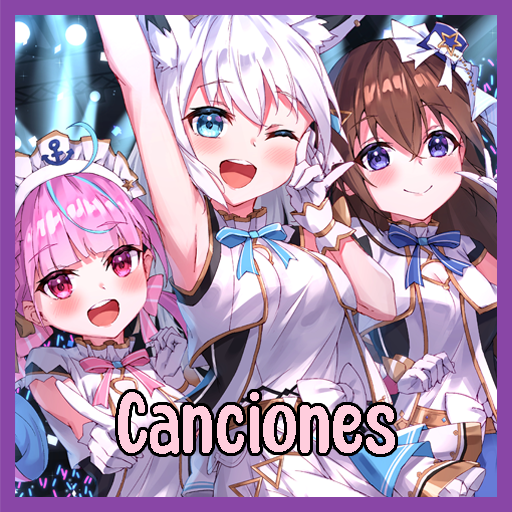
<style>
.page{position:relative;width:512px;height:512px}
.page>*{position:absolute;margin:0}
.t1{font:94.7px "HoneyNotes-Regular";color:#ffcddd}
</style>
<div class="page">
<p class="t1" style="left:118px;top:392px;width:277px;height:62px">Canciones</p>
</div>
